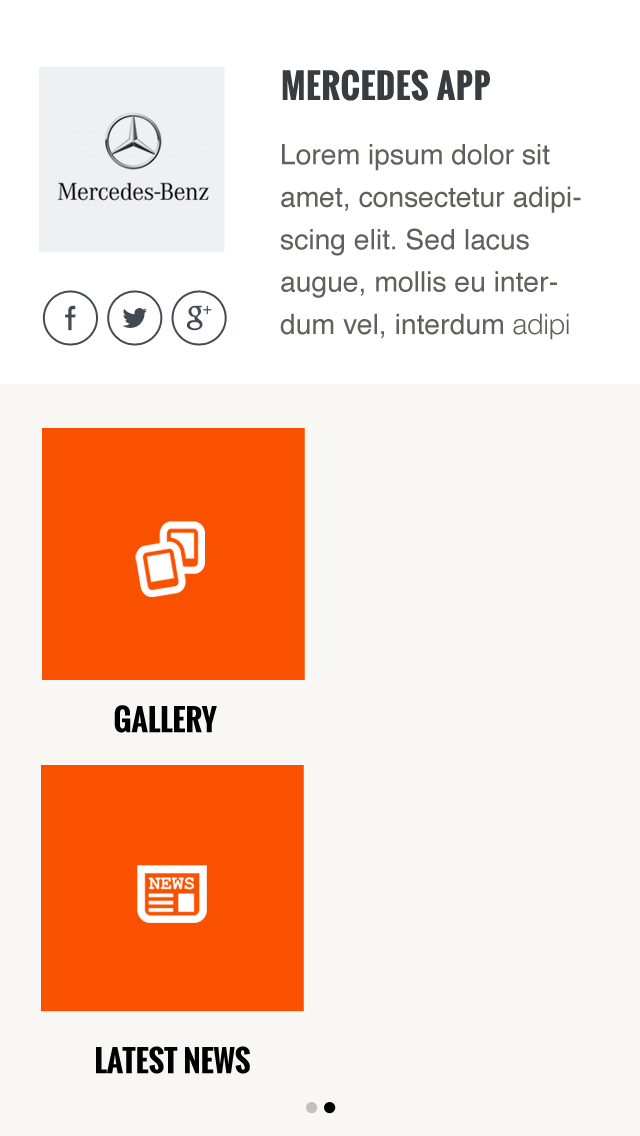
<style>
.page{position:relative;width:640px;height:1136px;background:#f8f7f4}
.page>*{position:absolute;margin:0}
.t1{font:33.6px "Oswald-Bold";letter-spacing:0.025em;color:#373c40}
.t2{font:28.3px/42.4px "Helvetica";color:#61605a}
.t3{font:28.3px/42.4px "HelveticaNeue-Light";color:#61605a}
.t4{font:30px "Oswald-Bold";color:#000000}
</style>
<div class="page">
<p class="t1" style="left:282px;top:69px;width:208px;height:32px">MERCEDES APP</p>
<p class="t2" style="left:280px;top:144px;width:301px;height:196px">Lorem ipsum dolor sit amet, consectetur adipiscing elit. Sed lacus augue, mollis eu interdum vel, interdum<span class="t3"> adipi</span></p>
<p class="t4" style="left:114px;top:705px;width:103px;height:28px">GALLERY</p>
<p class="t4" style="left:96px;top:1046px;width:154px;height:28px">LATEST NEWS</p>
</div>
